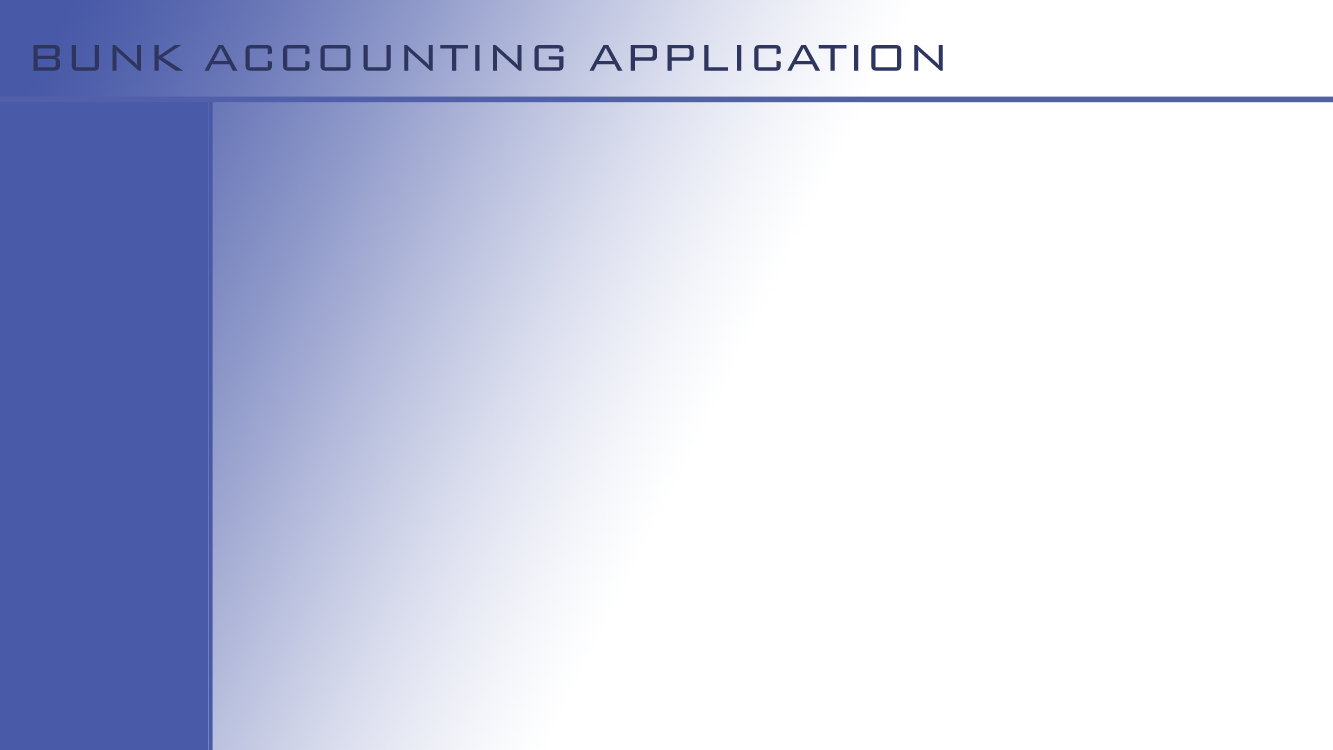
<style>
.page{position:relative;width:1333px;height:750px;background:#ffffff}
.page>*{position:absolute;margin:0}
.t1{font:50px "BankGothicBT-Light";color:#2e3660}
</style>
<div class="page">
<p class="t1" style="left:33px;top:45px;width:910px;height:26px">BUNK ACCOUNTING APPLICATION</p>
</div>
